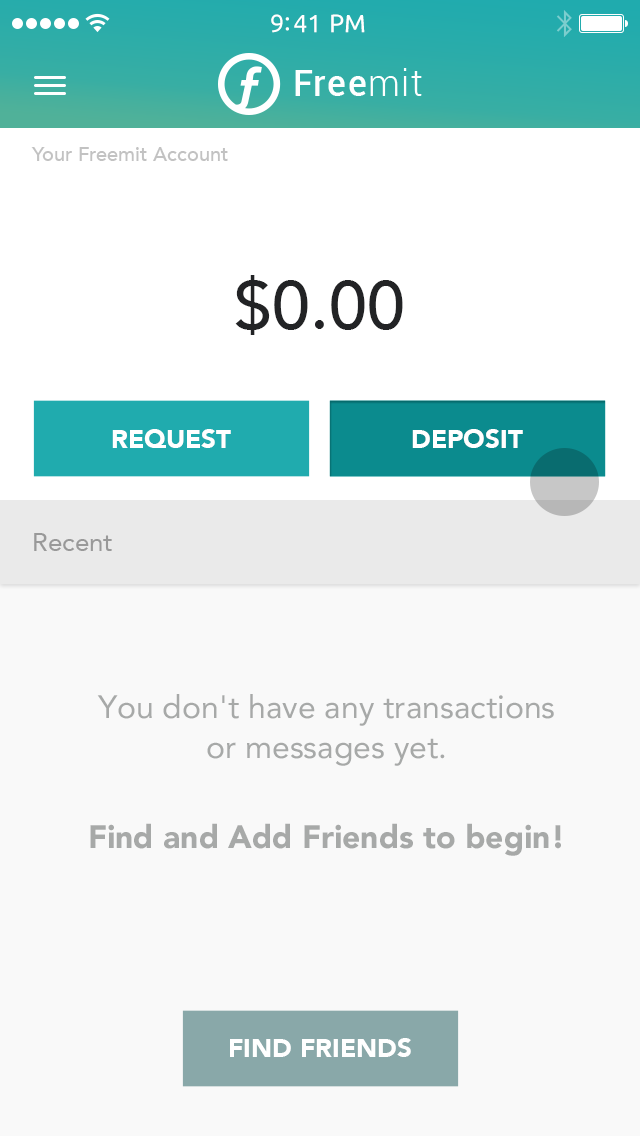
<style>
.page{position:relative;width:640px;height:1136px;background:#f9f9f9}
.page>*{position:absolute;margin:0}
.t1{font:25px "Ubuntu";color:#ffffff}
.t2{font:20px "Avenir-Medium";color:#c2c2c2}
.t3{font:68px "Avenir-Medium";color:#222325}
.t4{font:26px "Avenir-Black";color:#ffffff;text-transform:uppercase}
.t5{font:26px "Avenir-Roman";color:#999999}
.t6{font:32px/40px "Avenir-Roman";color:#a7a9a8}
.t7{font:32px/90px "Avenir-Black";color:#a7a9a8}
</style>
<div class="page">
<p class="t1" style="left:271px;top:14px;width:94px;height:19px">9:41 PM</p>
<p class="t2" style="left:31px;top:147px;width:197px;height:14px">Your Freemit Account</p>
<p class="t3" style="left:235px;top:275px;width:168px;height:60px">$0.00</p>
<p class="t4" style="left:112px;top:429px;width:119px;height:19px">request</p>
<p class="t4" style="left:412px;top:428px;width:111px;height:19px">Deposit</p>
<p class="t4" style="left:412px;top:429px;width:111px;height:19px">Deposit</p>
<p class="t5" style="left:34px;top:533px;width:78px;height:18px">Recent</p>
<p class="t6" style="left:90px;top:694px;width:471px;height:162px;text-align:center">You don't have any transactions<br>or messages yet.<br><span class="t7">Find and Add Friends to begin!</span></p>
<p class="t4" style="left:230px;top:1038px;width:181px;height:19px">Find Friends</p>
</div>
